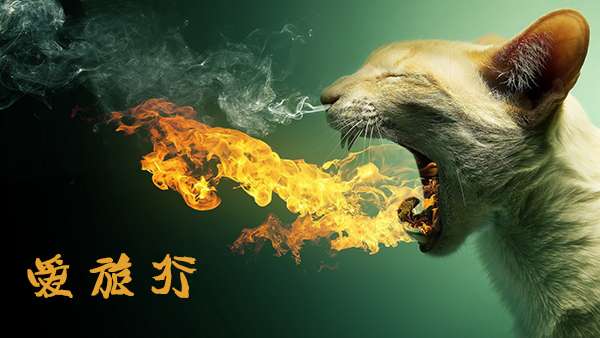
<style>
.page{position:relative;width:600px;height:338px}
.page>*{position:absolute;margin:0}
.t1{font:60px "SCFTANTTI";color:#e4a12e;font-weight:bold}
</style>
<div class="page">
<p class="t1" style="left:27px;top:253px;width:170px;height:46px">爱旅行</p>
</div>
